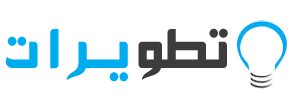
<style>
.page{position:relative;width:300px;height:105px;background:#ffffff}
.page>*{position:absolute;margin:0}
.t1{font:66.9px "HacenSamra";letter-spacing:0.1em;color:#00acee;scale:0.97 1}
.t2{font:66.9px "HacenSamra";letter-spacing:0.1em;color:#3c3c3c;scale:0.97 1}
</style>
<div class="page">
<p class="t1" style="left:5px;top:28px;width:223px;height:54px"><span class="t2">تطو</span>يرات</p>
</div>
